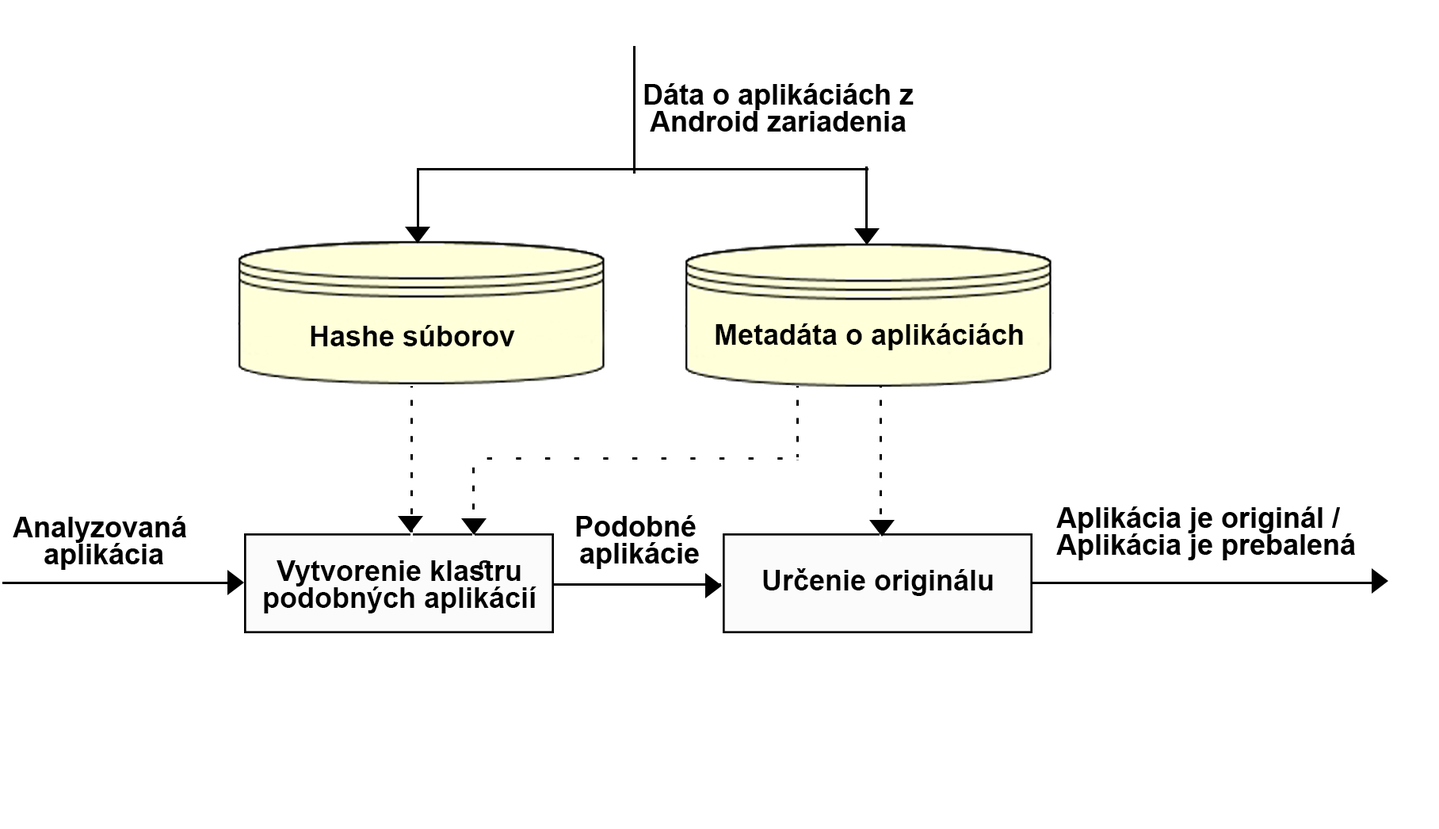
<style>
.page{position:relative;width:1439px;height:829px;background:#ffffff}
.page>*{position:absolute;margin:0}
.t1{font:28.5px/13.5px "Arial-BoldMT";color:#000000}
.t2{font:28.5px "Arial-BoldMT";color:#000000}
</style>
<div class="page">
<p class="t1" style="left:644px;top:83px;width:270px;height:49px;text-align:center">Dáta o aplikáciách z<br><br>Android zariadenia</p>
<p class="t2" style="left:311px;top:325px;width:204px;height:21px">Hashe súborov</p>
<p class="t2" style="left:715px;top:323px;width:308px;height:27px">Metadáta o aplikáciách</p>
<p class="t1" style="left:1056px;top:506px;width:299px;height:54px;text-align:center">Aplikácia je originál /  <br><br>Aplikácia je prebalená</p>
<p class="t1" style="left:13px;top:516px;width:173px;height:54px;text-align:center">Analyzovaná <br><br>aplikácia</p>
<p class="t1" style="left:576px;top:515px;width:123px;height:54px;text-align:center">Podobné <br><br>aplikácie</p>
<p class="t1" style="left:264px;top:560px;width:272px;height:53px;text-align:center">Vytvorenie klastru <br><br>podobných aplikácií</p>
<p class="t2" style="left:763px;top:568px;width:230px;height:28px">Určenie originálu</p>
</div>
